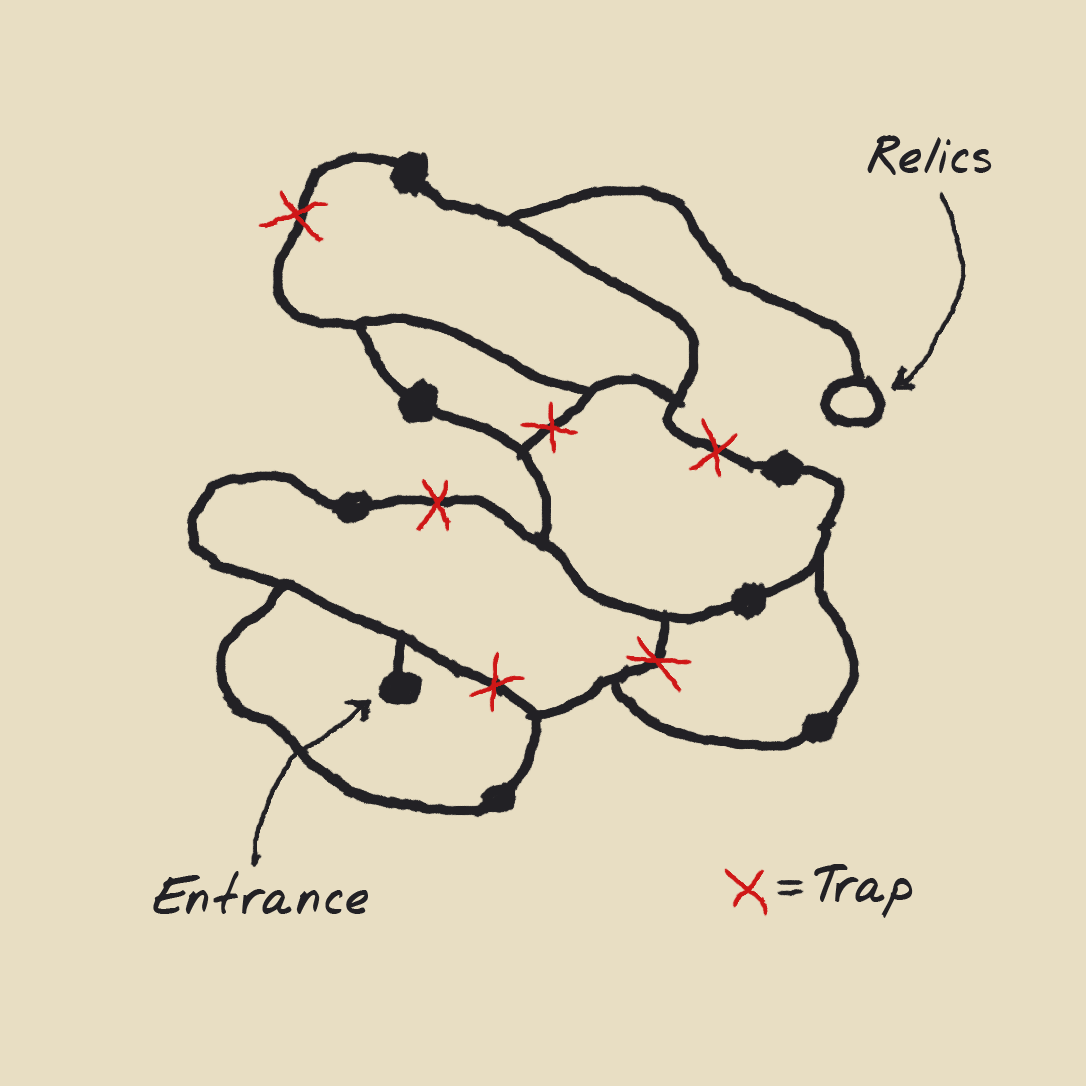
<style>
.page{position:relative;width:1086px;height:1086px;background:#e8dec3}
.page>*{position:absolute;margin:0}
.t1{font:60px "Jrhand";color:#222125}
</style>
<div class="page">
<p class="t1" style="left:867px;top:135px;width:125px;height:40px">Relics</p>
<p class="t1" style="left:814px;top:864px;width:99px;height:54px">Trap</p>
<p class="t1" style="left:153px;top:871px;width:215px;height:43px">Entrance</p>
</div>
